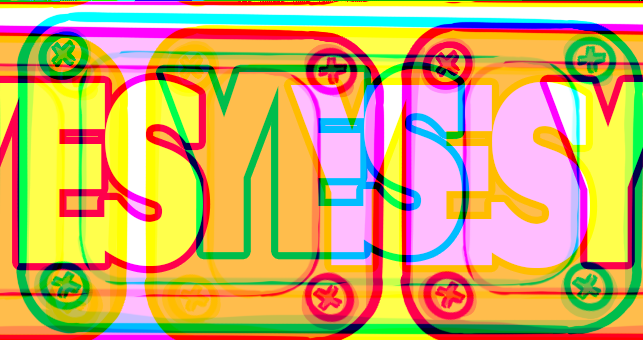
<style>
.page{position:relative;width:643px;height:340px}
.page>*{position:absolute;margin:0}
.t1{font:248.4px "Fava-Black";letter-spacing:-0.04em;scale:0.66 1}
</style>
<div class="page">
<p class="t1" style="left:159px;top:68px;width:300px;height:186px">YES</p>
</div>
